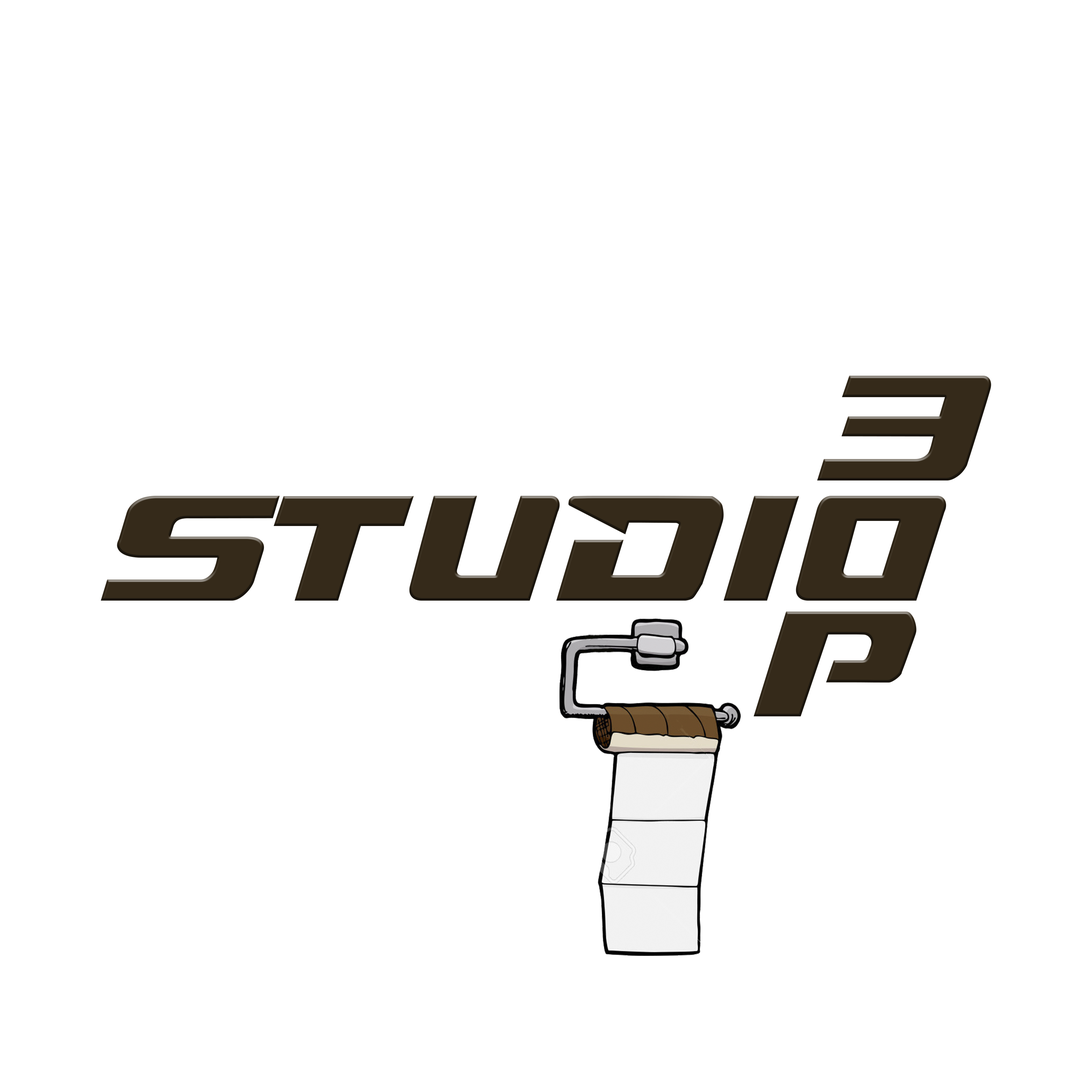
<style>
.page{position:relative;width:1092px;height:1092px;background:#ffffff}
.page>*{position:absolute;margin:0}
.t1{font:149.7px "DreamMMA";letter-spacing:0.08em;color:#352a1a}
</style>
<div class="page">
<p class="t1" style="left:817px;top:376px;width:174px;height:104px">3</p>
<p class="t1" style="left:101px;top:496px;width:845px;height:105px">stuDio</p>
<p class="t1" style="left:753px;top:612px;width:164px;height:104px">p</p>
</div>
